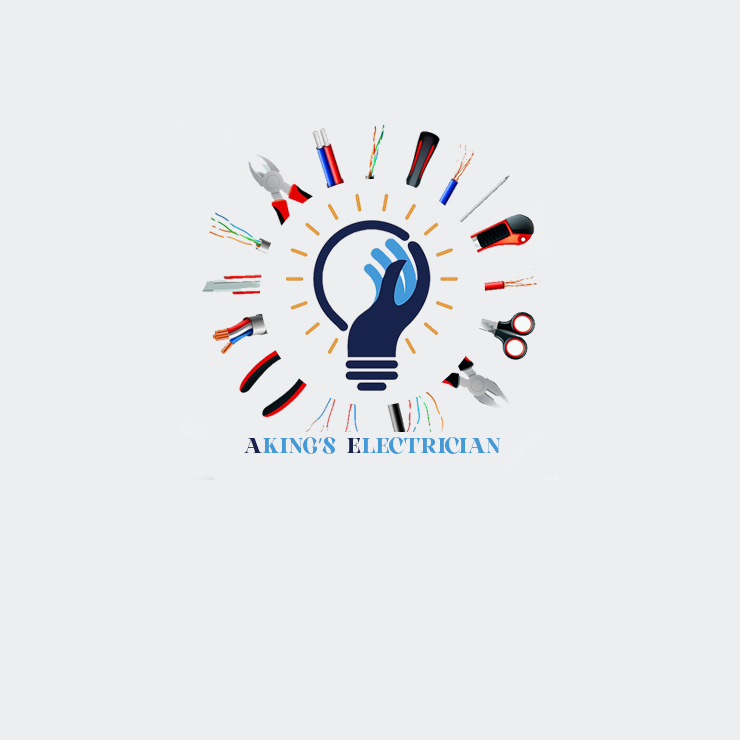
<style>
.page{position:relative;width:740px;height:740px;background:#edeef0}
.page>*{position:absolute;margin:0}
.t1{font:21.3px "Elova-Regular";letter-spacing:0.012em;color:#4499d7;text-transform:uppercase}
.t2{font:21.3px "Elova-Regular";letter-spacing:0.012em;color:#17234b;text-transform:uppercase}
.t3{font:21.3px "MyriadPro-Regular";letter-spacing:0.012em;color:#4499d7;text-transform:uppercase}
</style>
<div class="page">
<p class="t1" style="left:244px;top:437px;width:257px;height:17px"><span class="t2">A</span>KING<span class="t3">’</span>S  <span class="t2">E</span>LECTRICIAN</p>
</div>
